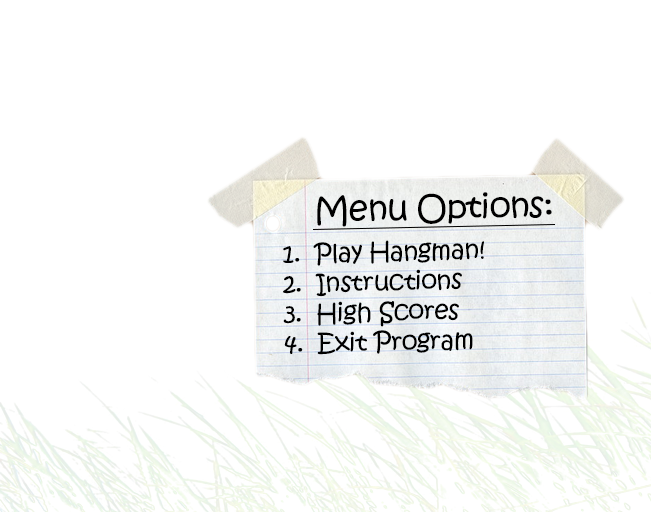
<style>
.page{position:relative;width:651px;height:512px;background:#ffffff}
.page>*{position:absolute;margin:0}
.t1{font:25px "KristenITC-Regular";letter-spacing:-0.025em;color:#000000}
.t2{font:29.1px "KristenITC-Regular";letter-spacing:-0.025em;color:#000000}
.t3{font:33.3px "KristenITC-Regular";letter-spacing:-0.025em;color:#000000}
</style>
<div class="page">
<p class="t1" style="left:283px;top:192px;width:269px;height:163px;text-align:right;rotate:-1deg"><span class="t2">    </span><span class="t3">Menu Options:<br><br></span>1.  Play Hangman!<br>2.  Instructions<br>3.  High Scores<br>4.  Exit Program</p>
</div>
